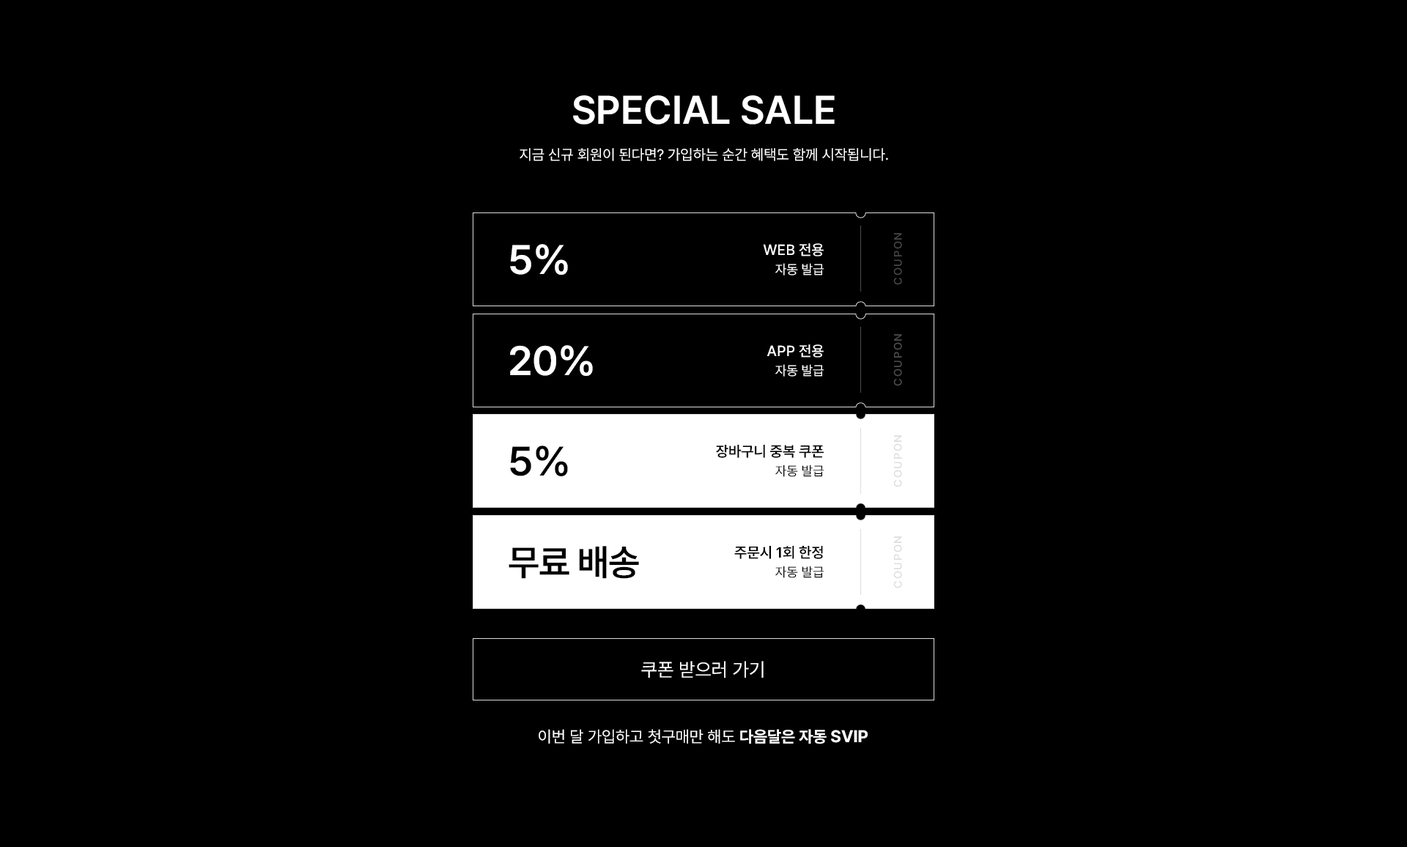
<style>
.page{position:relative;width:1407px;height:847px;background:#000000}
.page>*{position:absolute;margin:0}
.t1{font:39.6px "Pretendard-SemiBold";color:#ffffff;text-transform:uppercase}
.t2{font:39.6px "Pretendard-SemiBold";letter-spacing:-0.005em;color:#ffffff;text-transform:uppercase}
.t3{font:14.7px "Pretendard-Regular";color:#ffffff;text-transform:uppercase}
.t4{font:11px "Pretendard-Medium";letter-spacing:0.1em;color:#454545;text-transform:uppercase}
.t5{font:41px "Pretendard-SemiBold";letter-spacing:-0.01em;color:#ffffff;text-transform:uppercase}
.t6{font:14.7px/20.5px "Pretendard-Medium";text-transform:uppercase}
.t7{font:13.2px/20.5px "Pretendard-Regular";text-transform:uppercase}
.t8{font:14.7px/20.5px "Pretendard-Medium";color:#ffffff;text-transform:uppercase}
.t9{font:13.2px/20.5px "Pretendard-Regular";color:#ffffff;text-transform:uppercase}
.t10{font:11px "Pretendard-Medium";letter-spacing:0.1em;color:#4b4b4b;text-transform:uppercase}
.t11{font:11px "Pretendard-Medium";letter-spacing:0.1em;color:#dddddd;text-transform:uppercase}
.t12{font:41px "Pretendard-SemiBold";letter-spacing:-0.01em;color:#000000;text-transform:uppercase}
.t13{font:14.7px/20.5px "Pretendard-SemiBold";color:#000000;text-transform:uppercase}
.t14{font:13.2px/20.5px "Pretendard-Regular";color:#000000;text-transform:uppercase}
.t15{font:36.6px "Pretendard-SemiBold";letter-spacing:-0.02em;color:#000000;text-transform:uppercase}
.t16{font:19.1px "Pretendard-Regular";color:#ffffff;text-transform:uppercase}
.t17{font:19.1px "Pretendard-Regular";text-transform:uppercase}
.t18{font:16.1px "Pretendard-Regular";color:#ffffff;text-transform:uppercase}
.t19{font:16.1px "Pretendard-Bold";color:#ffffff;text-transform:uppercase}
.t20{font:16.9px "Pretendard-Bold";color:#ffffff;text-transform:uppercase}
</style>
<div class="page">
<p class="t1" style="left:573px;top:95px;width:262px;height:30px">SPECIAL sale</p>
<p class="t2" style="left:574px;top:95px;width:260px;height:30px">SPECIAL <span class="t1">sale</span></p>
<p class="t3" style="left:520px;top:148px;width:368px;height:13px">지금 신규 회원이 된다면? 가입하는 순간 혜택도 함께 시작됩니다.</p>
<p class="t3" style="left:520px;top:148px;width:368px;height:13px">지금 신규 회원이 된다면? 가입하는 순간 혜택도 함께 시작됩니다.</p>
<p class="t4" style="left:893px;top:233px;width:9px;height:52px;rotate:-90deg">coupon</p>
<p class="t4" style="left:893px;top:233px;width:9px;height:52px;rotate:-90deg">coupon</p>
<p class="t5" style="left:510px;top:243px;width:58px;height:31px">5%</p>
<p class="t5" style="left:510px;top:244px;width:58px;height:31px">5%</p>
<p class="t6" style="left:763px;top:243px;width:61px;height:32px;text-align:right">web 전용<br><span class="t7"> 자동 발급</span></p>
<p class="t8" style="left:763px;top:243px;width:61px;height:33px;text-align:right">web 전용<br><span class="t9"> 자동 발급</span></p>
<p class="t10" style="left:893px;top:334px;width:9px;height:52px;rotate:-90deg">coupon</p>
<p class="t10" style="left:893px;top:334px;width:9px;height:52px;rotate:-90deg">coupon</p>
<p class="t5" style="left:510px;top:344px;width:83px;height:31px">20%</p>
<p class="t5" style="left:510px;top:345px;width:83px;height:31px">20%</p>
<p class="t6" style="left:767px;top:344px;width:57px;height:32px;text-align:right">app 전용<br><span class="t7"> 자동 발급</span></p>
<p class="t8" style="left:767px;top:344px;width:57px;height:33px;text-align:right">app 전용<br><span class="t9"> 자동 발급</span></p>
<p class="t11" style="left:893px;top:435px;width:9px;height:52px;rotate:-90deg">coupon</p>
<p class="t11" style="left:893px;top:435px;width:9px;height:52px;rotate:-90deg">coupon</p>
<p class="t12" style="left:510px;top:446px;width:58px;height:30px">5%</p>
<p class="t12" style="left:510px;top:446px;width:58px;height:30px">5%</p>
<p class="t13" style="left:716px;top:445px;width:108px;height:32px;text-align:right">장바구니 중복 쿠폰<br><span class="t14">자동 발급</span></p>
<p class="t13" style="left:716px;top:445px;width:108px;height:32px;text-align:right">장바구니 중복 쿠폰<br><span class="t14">자동 발급</span></p>
<p class="t11" style="left:893px;top:537px;width:9px;height:52px;rotate:-90deg">coupon</p>
<p class="t11" style="left:893px;top:537px;width:9px;height:52px;rotate:-90deg">coupon</p>
<p class="t15" style="left:509px;top:546px;width:130px;height:33px">무료 배송</p>
<p class="t15" style="left:510px;top:546px;width:131px;height:33px">무료 배송</p>
<p class="t13" style="left:734px;top:546px;width:90px;height:32px;text-align:right">주문시 1회 한정<br><span class="t14">자동 발급</span></p>
<p class="t13" style="left:734px;top:546px;width:90px;height:32px;text-align:right">주문시 1회 한정<br><span class="t14">자동 발급</span></p>
<p class="t16" style="left:641px;top:661px;width:123px;height:17px">쿠폰 받으러 가기</p>
<p class="t17" style="left:642px;top:661px;width:122px;height:17px">쿠폰 받으러 가기</p>
<p class="t18" style="left:539px;top:729px;width:329px;height:15px">이번 달 가입하고 첫구매만 해도 <span class="t19">다음달은 자동 </span><span class="t20">svip</span></p>
<p class="t18" style="left:539px;top:729px;width:329px;height:15px">이번 달 가입하고 첫구매만 해도 <span class="t19">다음달은 자동 </span><span class="t20">svip</span></p>
</div>
